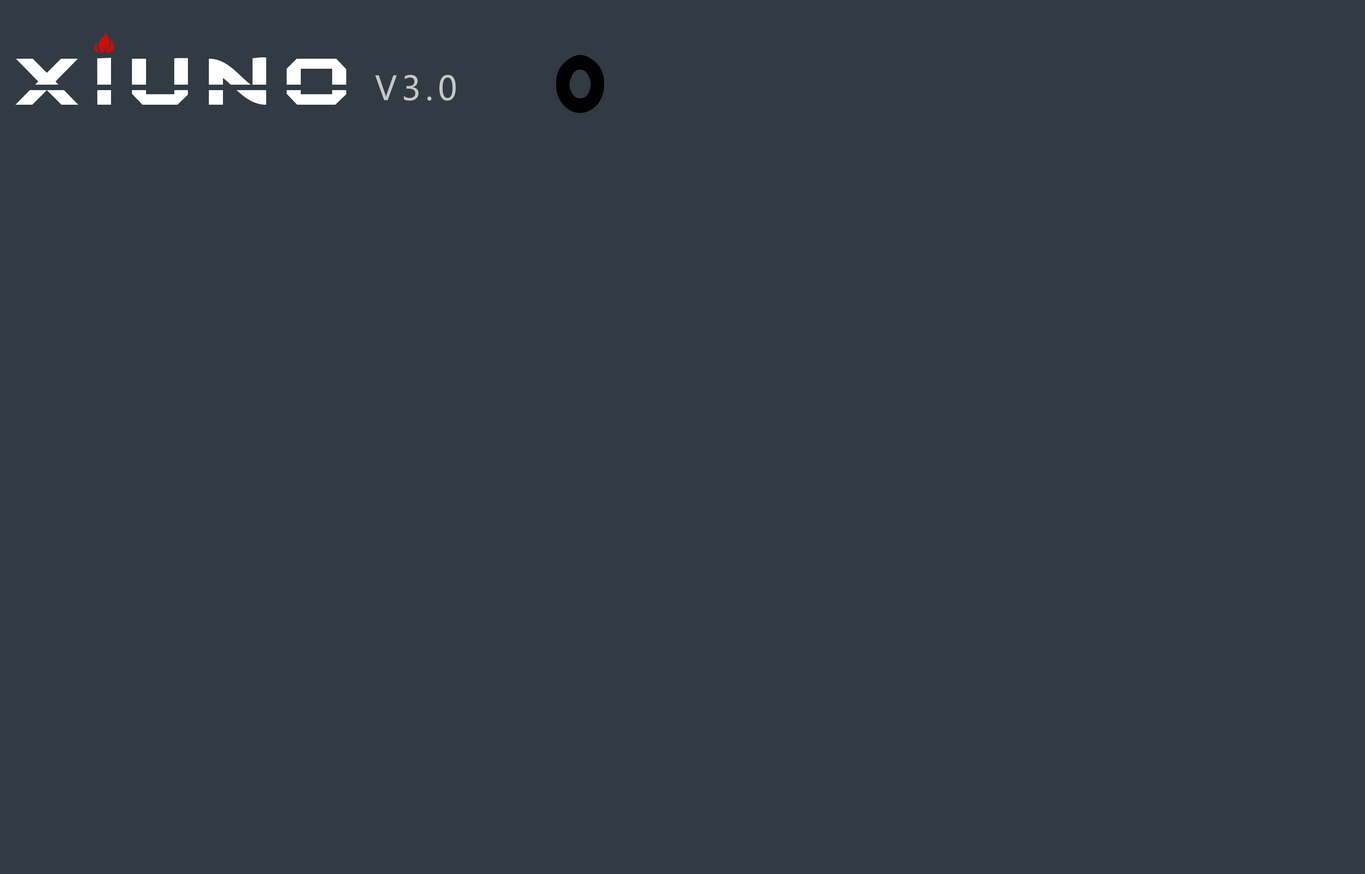
<style>
.page{position:relative;width:1365px;height:874px;background:#323b43}
.page>*{position:absolute;margin:0}
.t1{font:78.3px "ChinyenNormal";letter-spacing:0.14em;color:#000000}
.t2{font:32.8px "MicrosoftYaHei";letter-spacing:0.14em;color:#c8c8c8}
</style>
<div class="page">
<p class="t1" style="left:556px;top:55px;width:48px;height:58px">o</p>
<p class="t2" style="left:375px;top:75px;width:81px;height:26px">V3.0</p>
</div>
